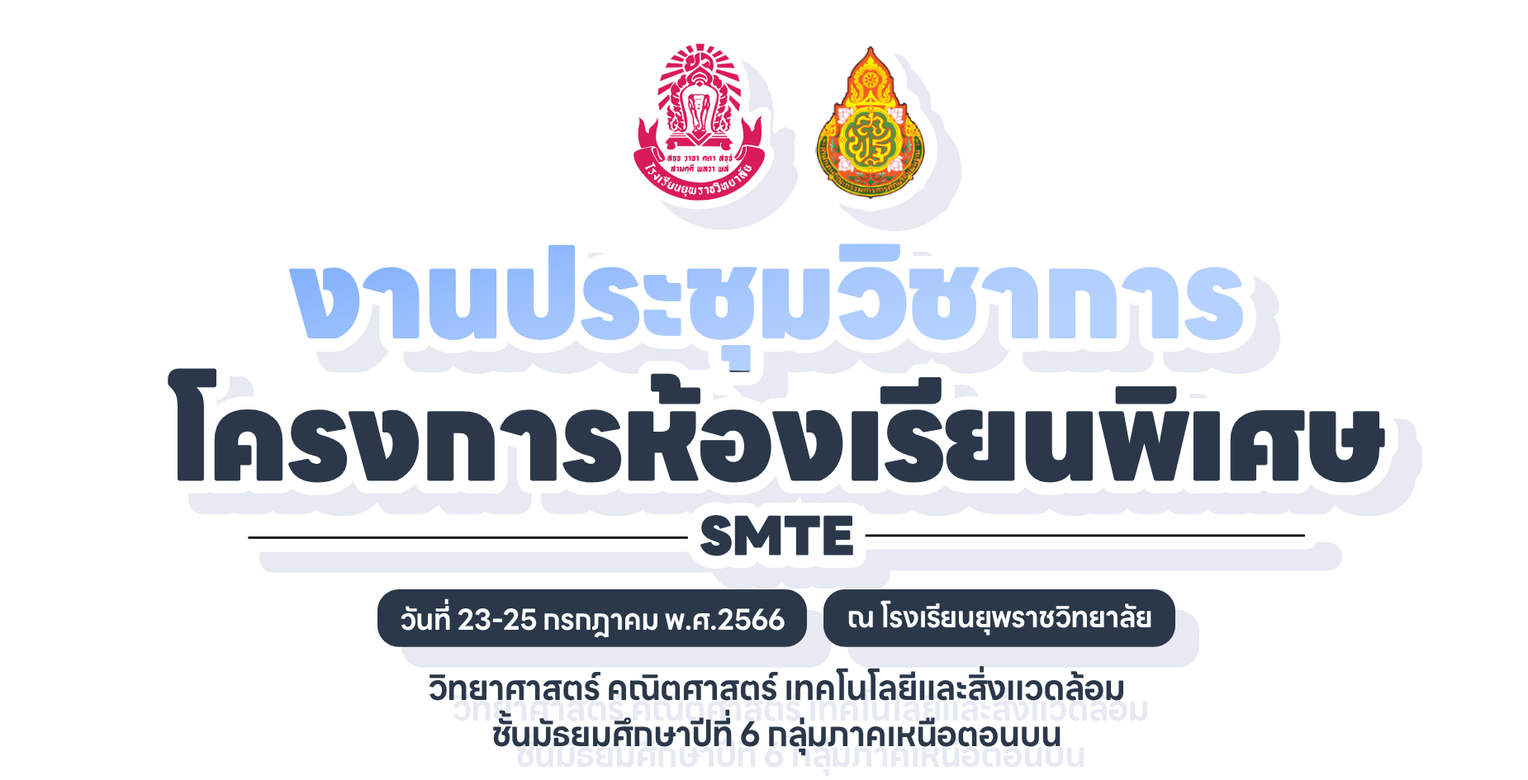
<style>
.page{position:relative;width:1528px;height:780px;background:#ffffff}
.page>*{position:absolute;margin:0}
.t1{font:117.7px/142.5px "LINESeedSansTH-Heavy";letter-spacing:-0.02em}
.t2{font:53.7px "LINESeedSansTH-Heavy";letter-spacing:-0.02em;color:#2a384a}
.t3{font:28.7px "LINESeedSansTH-Bold";letter-spacing:-0.02em;color:#ffffff}
.t4{font:34.1px "LINESeedSansTH-Bold";letter-spacing:-0.02em;color:#2a384a}
</style>
<div class="page">
<p class="t1" style="left:168px;top:244px;width:1217px;height:239px;text-align:center">งานประชุมวิชาการ <br>โครงการห้องเรียนพิเศษ</p>
<p class="t2" style="left:700px;top:515px;width:153px;height:42px">SMTE</p>
<p class="t3" style="left:401px;top:599px;width:384px;height:39px">วันที่ 23-25 กรกฎาคม พ.ศ.2566</p>
<p class="t3" style="left:848px;top:600px;width:303px;height:36px">ณ โรงเรียนยุพราชวิทยาลัย</p>
<p class="t4" style="left:429px;top:666px;width:695px;height:35px">วิทยาศาสตร์ คณิตศาสตร์ เทคโนโลยีและสิ่งแวดล้อม</p>
<p class="t4" style="left:493px;top:709px;width:567px;height:48px">ชั้นมัธยมศึกษาปีที่ 6 กลุ่มภาคเหนือตอนบน</p>
</div>
